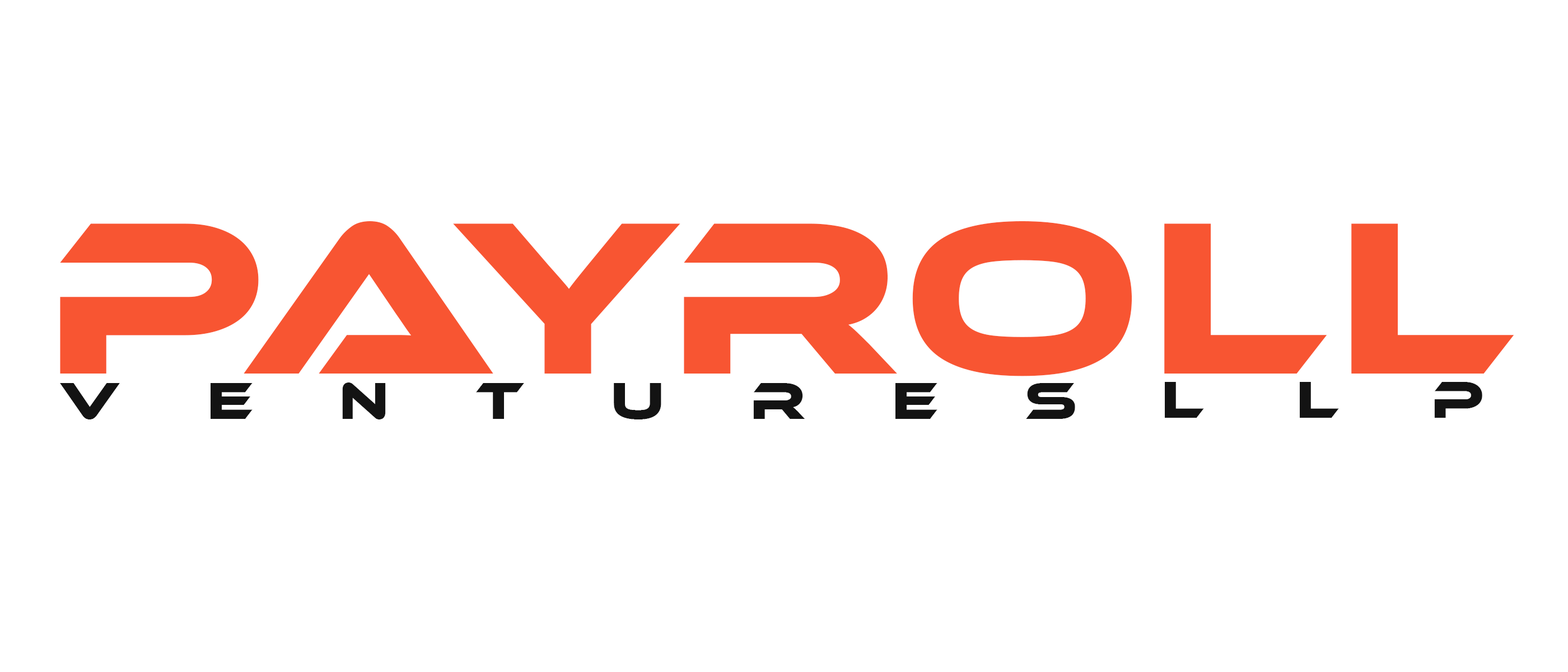
<style>
.page{position:relative;width:1568px;height:672px;background:#ffffff}
.page>*{position:absolute;margin:0}
.t1{font:224px "EthnocentricRg-Regular";letter-spacing:0.04em;color:#f85532}
.t2{font:53.7px "EthnocentricRg-Regular";letter-spacing:1.62em;color:#131313}
.t3{font:53.7px "EthnocentricRg-Regular";letter-spacing:1.72em;color:#131313}
</style>
<div class="page">
<p class="t1" style="left:60px;top:221px;width:1454px;height:155px">payroll</p>
<p class="t2" style="left:60px;top:382px;width:1015px;height:37px">Ventures</p>
<p class="t3" style="left:1165px;top:382px;width:317px;height:36px">llp</p>
</div>
